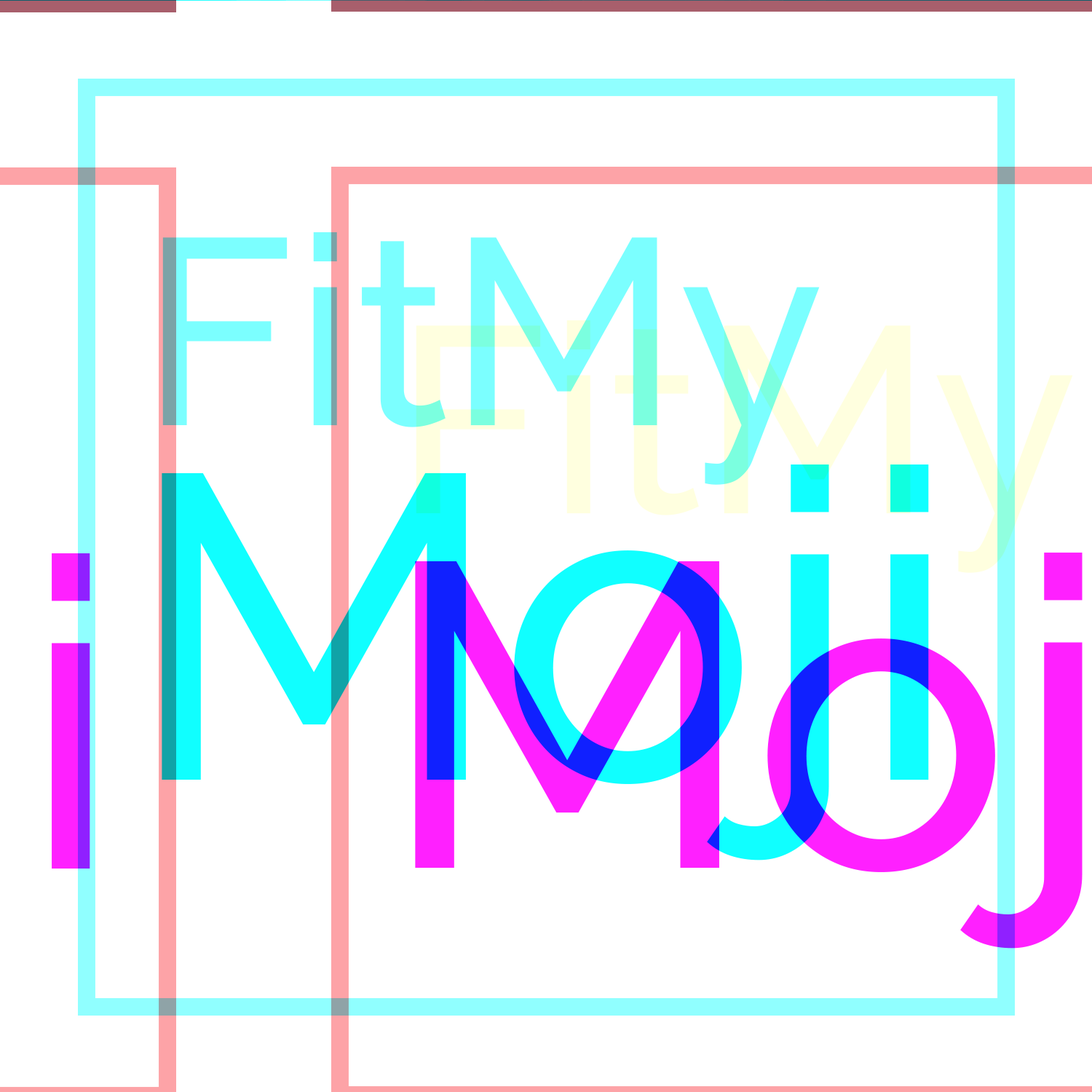
<style>
.page{position:relative;width:1092px;height:1092px;background:#ffffff}
.page>*{position:absolute;margin:0}
.t1{font:264.5px "Raleway-Medium";color:#7bffff}
.t2{font:431.8px "Raleway-Medium"}
</style>
<div class="page">
<p class="t1" style="left:162px;top:232px;width:658px;height:252px">FitMy</p>
<p class="t2" style="left:162px;top:464px;width:767px;height:396px">Moji</p>
</div>
